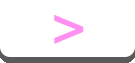
<style>
.page{position:relative;width:135px;height:63px;background:#ffffff}
.page>*{position:absolute;margin:0}
.t1{font:53.3px "ForteMT";color:#ff8ff1}
</style>
<div class="page">
<p class="t1" style="left:54px;top:14px;width:30px;height:30px">&gt;</p>
</div>
